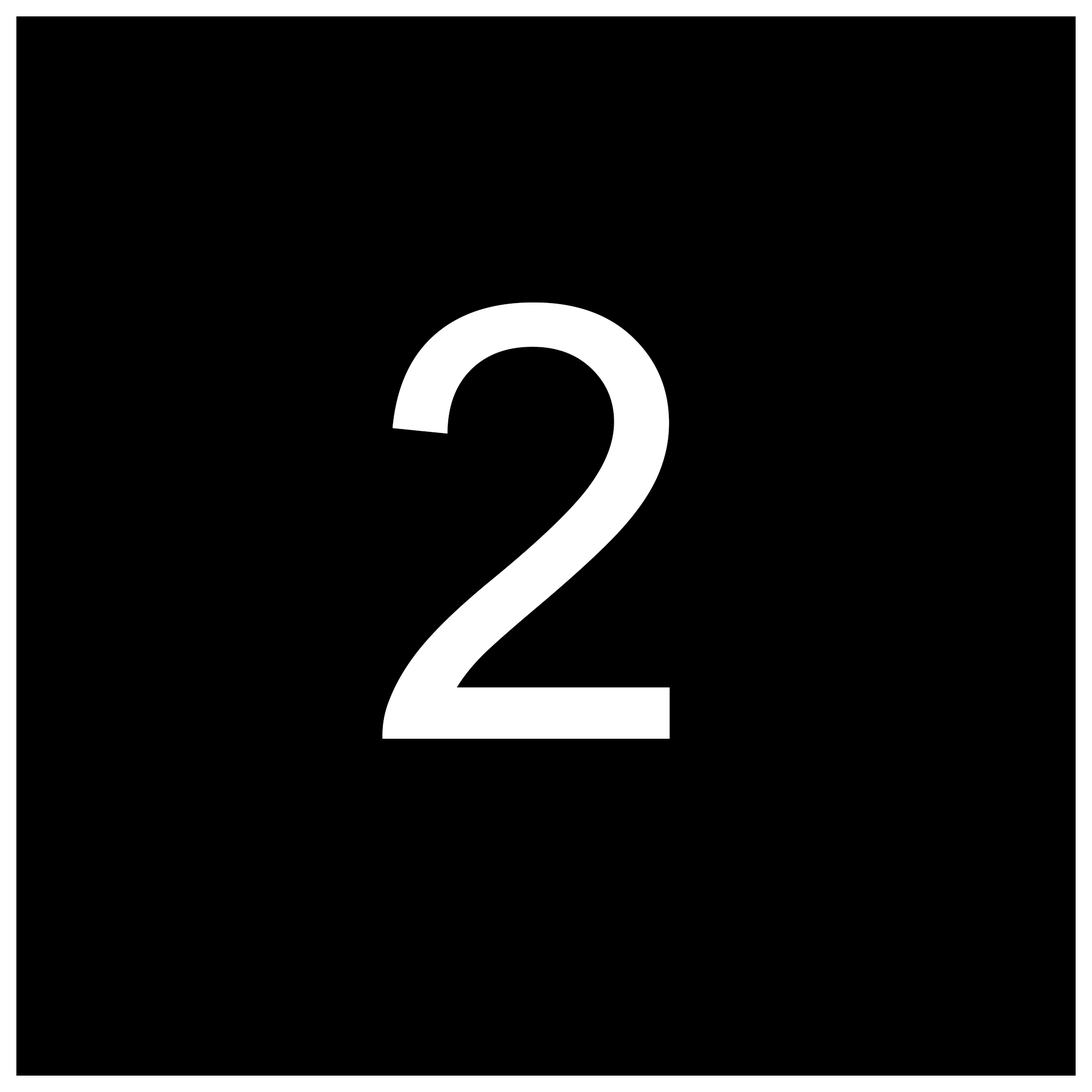
<style>
.page{position:relative;width:1092px;height:1092px;background:#000000}
.page>*{position:absolute;margin:0}
.t1{font:606.7px "ArialMT";color:#ffffff}
</style>
<div class="page">
<p class="t1" style="left:382px;top:302px;width:288px;height:437px">2</p>
</div>
